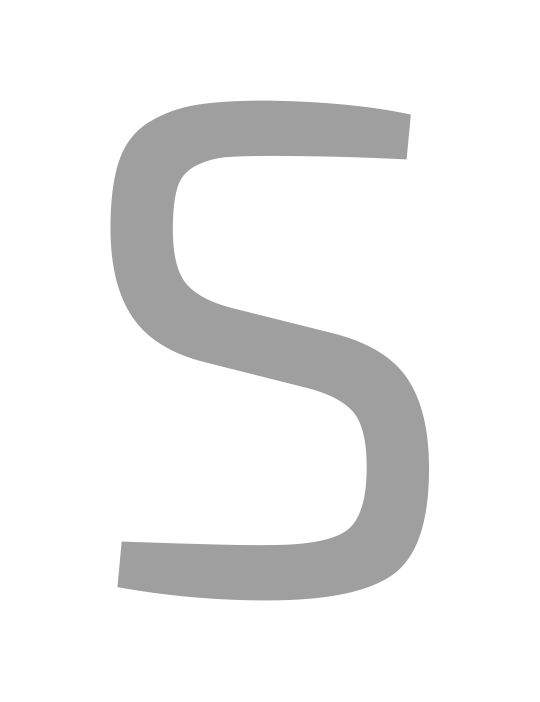
<style>
.page{position:relative;width:540px;height:702px;background:#ffffff}
.page>*{position:absolute;margin:0}
.t1{font:700px "Exo2-Regular";color:#9f9f9f}
</style>
<div class="page">
<p class="t1" style="left:110px;top:100px;width:319px;height:501px">S</p>
</div>
